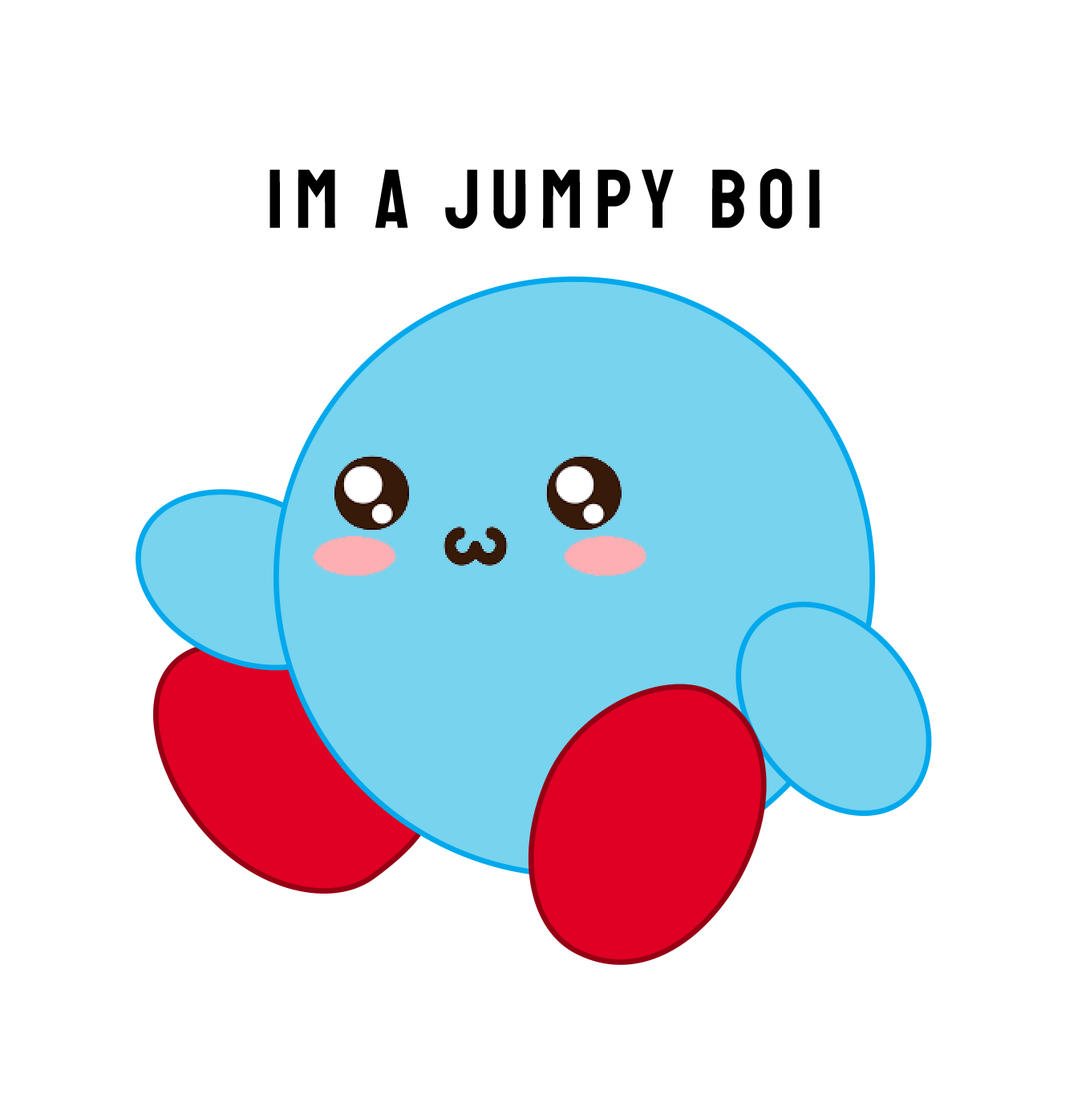
<style>
.page{position:relative;width:1090px;height:1094px;background:#ffffff}
.page>*{position:absolute;margin:0}
.t1{font:83.4px "Staatliches-Regular";letter-spacing:0.14em;color:#000000;scale:0.97 1}
</style>
<div class="page">
<p class="t1" style="left:269px;top:168px;width:550px;height:61px">IM A Jumpy BOI</p>
</div>
